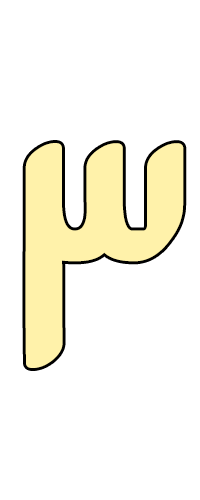
<style>
.page{position:relative;width:200px;height:500px;background:#ffffff}
.page>*{position:absolute;margin:0}
.t1{font:293.8px "AArsoo-Bold";color:#fff2aa;scale:0.96 1}
</style>
<div class="page">
<p class="t1" style="left:25px;top:143px;width:159px;height:225px">3</p>
</div>
